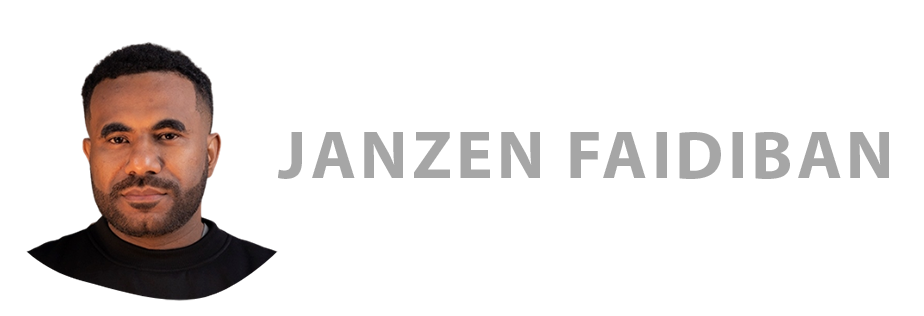
<style>
.page{position:relative;width:924px;height:316px;background:#ffffff}
.page>*{position:absolute;margin:0}
.t1{font:68.9px "MyriadPro-Bold";letter-spacing:0.06em;color:#a6a6a6;text-transform:uppercase}
</style>
<div class="page">
<p class="t1" style="left:278px;top:132px;width:611px;height:47px">janzen FAIDIBAN</p>
</div>
